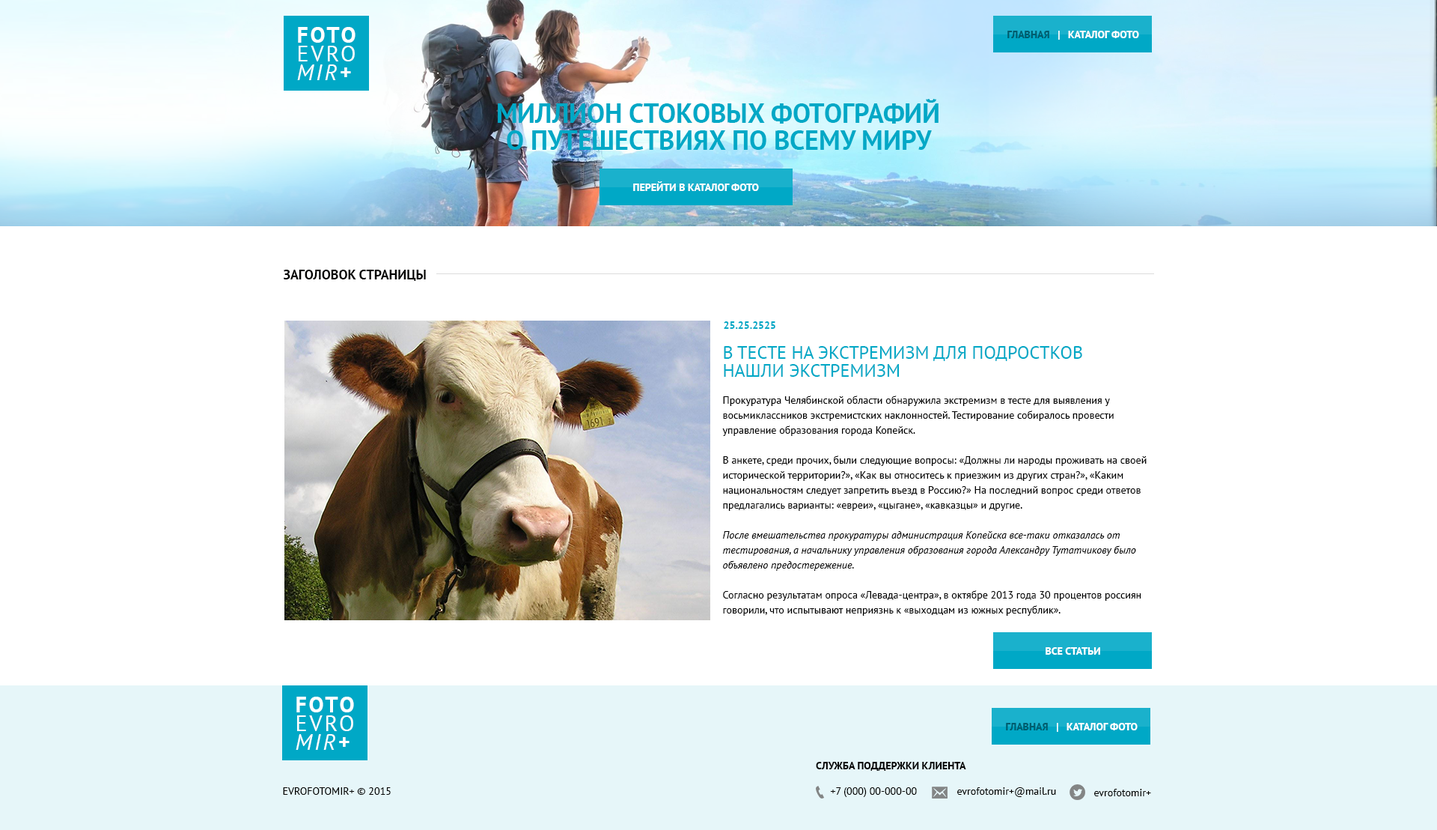
<style>
.page{position:relative;width:1437px;height:830px;background:#ffffff}
.page>*{position:absolute;margin:0}
.t1{font:22.5px/18.7px "PTSans-Bold";letter-spacing:0.1em;color:#ffffff;text-transform:uppercase}
.t2{font:22.5px/18.7px "PTSans-Regular";letter-spacing:0.1em;color:#ffffff;text-transform:uppercase}
.t3{font:22.5px/18.7px "PTSans-Italic";letter-spacing:0.1em;color:#ffffff;text-transform:uppercase}
.t4{font:22.5px/18.7px "PTSans-BoldItalic";letter-spacing:0.1em;color:#ffffff;text-transform:uppercase}
.t5{font:10.5px "PTSans-Bold";color:#ffffff;text-transform:uppercase}
.t6{font:10.5px "PTSans-Bold";color:#005c6d;text-transform:uppercase}
.t7{font:27px/27px "PTSans-Bold";color:#00a8c6;text-transform:uppercase}
.t8{font:13.5px "PTSans-Bold";color:#010100;text-transform:uppercase}
.t9{font:10.5px "PTSans-Bold";color:#00a8c6}
.t10{font:18px/18px "PTSans-Regular";color:#00a8c6;text-transform:uppercase}
.t11{font:10.5px/15px "PTSans-Regular";color:#000000}
.t12{font:10.5px/15px "PTSans-Italic";color:#000000}
.t13{font:10.5px "PTSans-Bold";color:#000000;text-transform:uppercase}
.t14{font:10.5px "PTSans-Regular";color:#010100;text-transform:uppercase}
.t15{font:10.5px "PTSans-Regular";color:#010100}
</style>
<div class="page">
<p class="t1" style="left:297px;top:27px;width:59px;height:53px;text-align:justify">FOTO<br><span class="t2">EVRO<br></span><span class="t3">MIR</span><span class="t4">+</span></p>
<p class="t5" style="left:1008px;top:31px;width:131px;height:9px"><span class="t6">Главная   </span>|   Каталог фото</p>
<p class="t7" style="left:498px;top:99px;width:441px;height:51px;text-align:center">миллион стоковых фотографий<br>о путешествиях по всему миру</p>
<p class="t5" style="left:633px;top:181px;width:126px;height:10px">Перейти в Каталог фото</p>
<p class="t8" style="left:283px;top:270px;width:143px;height:11px">Заголовок страницы</p>
<p class="t9" style="left:724px;top:321px;width:52px;height:8px">25.25.2525</p>
<p class="t10" style="left:724px;top:346px;width:359px;height:31px">В тесте на экстремизм для подростков<br>нашли экстремизм</p>
<p class="t11" style="left:722px;top:395px;width:425px;height:220px">Прокуратура Челябинской области обнаружила экстремизм в тесте для выявления у восьмиклассников экстремистских наклонностей. Тестирование собиралось провести управление образования города Копейск.<br><br>В анкете, среди прочих, были следующие вопросы: «Должны ли народы проживать на своей исторической территории?», «Как вы относитесь к приезжим из других стран?», «Каким национальностям следует запретить въезд в Россию?» На последний вопрос среди ответов предлагались варианты: «евреи», «цыгане», «кавказцы» и другие. <br><br><span class="t12">После вмешательства прокуратуры администрация Копейска все-таки отказалась от тестирования, а начальнику управления образования города Александру Тутатчикову было объявлено предостережение.<br></span><br>Согласно результатам опроса «Левада-центра», в октябре 2013 года 30 процентов россиян говорили, что испытывают неприязнь к «выходцам из южных республик».</p>
<p class="t5" style="left:1046px;top:647px;width:55px;height:7px">все статьи</p>
<p class="t1" style="left:296px;top:696px;width:58px;height:53px;text-align:justify">FOTO<br><span class="t2">EVRO<br></span><span class="t3">MIR</span><span class="t4">+</span></p>
<p class="t5" style="left:1006px;top:722px;width:132px;height:9px"><span class="t6">Главная   </span>|   Каталог фото</p>
<p class="t13" style="left:816px;top:761px;width:151px;height:9px">Служба поддержки клиента</p>
<p class="t14" style="left:283px;top:787px;width:108px;height:7px">EVROFOTOMIR+ © 2015</p>
<p class="t15" style="left:830px;top:787px;width:87px;height:10px">+7 (000) 00-000-00</p>
<p class="t15" style="left:958px;top:787px;width:98px;height:10px">evrofotomir+@mail.ru</p>
<p class="t15" style="left:1095px;top:788px;width:56px;height:8px">evrofotomir+</p>
</div>
